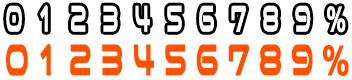
<style>
.page{position:relative;width:352px;height:80px;background:#ffffff}
.page>*{position:absolute;margin:0}
.t1{font:44.7px "NicoKaku";letter-spacing:0.7em;color:#ffffff;scale:0.48 1}
.t2{font:34.4px "NicoKaku";letter-spacing:0.7em;color:#ffffff;scale:0.63 1}
.t3{font:53.1px "NicoKaku";letter-spacing:0.26em;color:#ff5100;scale:0.57 1}
.t4{font:40.8px "NicoKaku";letter-spacing:0.26em;color:#ff5100;scale:0.75 1}
</style>
<div class="page">
<p class="t1" style="left:6px;top:5px;width:340px;height:28px">0123456789<span class="t2">%</span></p>
<p class="t3" style="left:6px;top:43px;width:343px;height:33px">0123456789<span class="t4">%</span></p>
</div>
